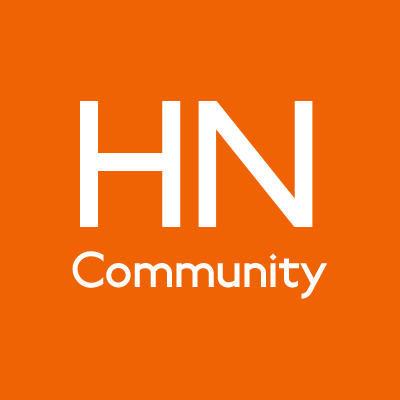
<style>
.page{position:relative;width:400px;height:400px;background:#ef6305}
.page>*{position:absolute;margin:0}
.t1{font:50px "Railway";color:#ffffff}
.t2{font:180px "Railway";color:#ffffff}
</style>
<div class="page">
<p class="t1" style="left:72px;top:101px;width:256px;height:198px"><span class="t2">HN<br></span>Community</p>
</div>
